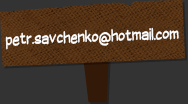
<style>
.page{position:relative;width:188px;height:104px;background:#333333}
.page>*{position:absolute;margin:0}
.t1{font:16px "SuplexmentaryComicNC";color:#ffffff;scale:0.8 1}
</style>
<div class="page">
<p class="t1" style="left:5px;top:27px;width:174px;height:23px;rotate:-2deg">petr.savchenko@hotmail.com</p>
</div>
